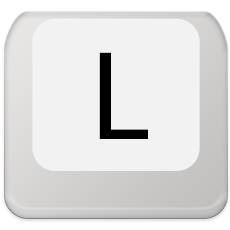
<style>
.page{position:relative;width:230px;height:230px;background:#f2f2f2}
.page>*{position:absolute;margin:0}
.t1{font:128px "MyriadPro-Regular";color:#000000}
</style>
<div class="page">
<p class="t1" style="left:99px;top:52px;width:49px;height:87px">L</p>
</div>
